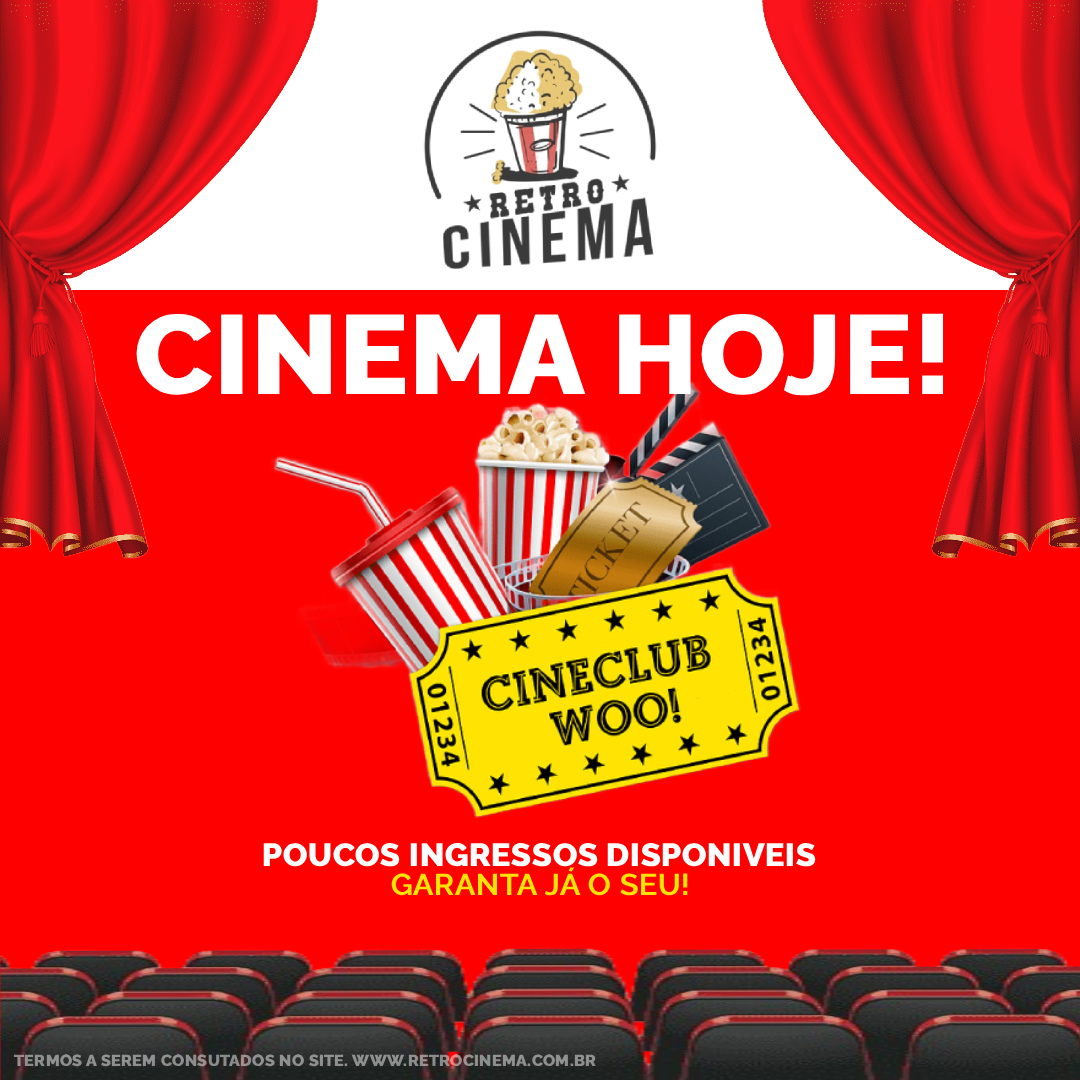
<style>
.page{position:relative;width:1080px;height:1080px;background:#ff0000}
.page>*{position:absolute;margin:0}
.t1{font:112px "Raleway-ExtraBold";color:#ffffff;font-weight:bold}
.t2{font:32px "Raleway-ExtraBold";color:#ffffff;font-weight:bold}
.t3{font:30px "Raleway-SemiBold";color:#fee303;font-weight:bold}
.t4{font:16px "Raleway-ExtraBold";color:#8f908f;font-weight:bold}
</style>
<div class="page">
<p class="t1" style="left:136px;top:313px;width:808px;height:83px">CINEMA HOJE!</p>
<p class="t2" style="left:263px;top:843px;width:553px;height:24px">POUCOS INGRESSOS DISPONIVEIS</p>
<p class="t3" style="left:391px;top:867px;width:297px;height:29px">GARANTA JÁ O SEU!</p>
<p class="t4" style="left:13px;top:1054px;width:583px;height:13px">TERMOS A SEREM CONSUTADOS NO SITE. WWW.RETROCINEMA.COM.BR</p>
</div>
